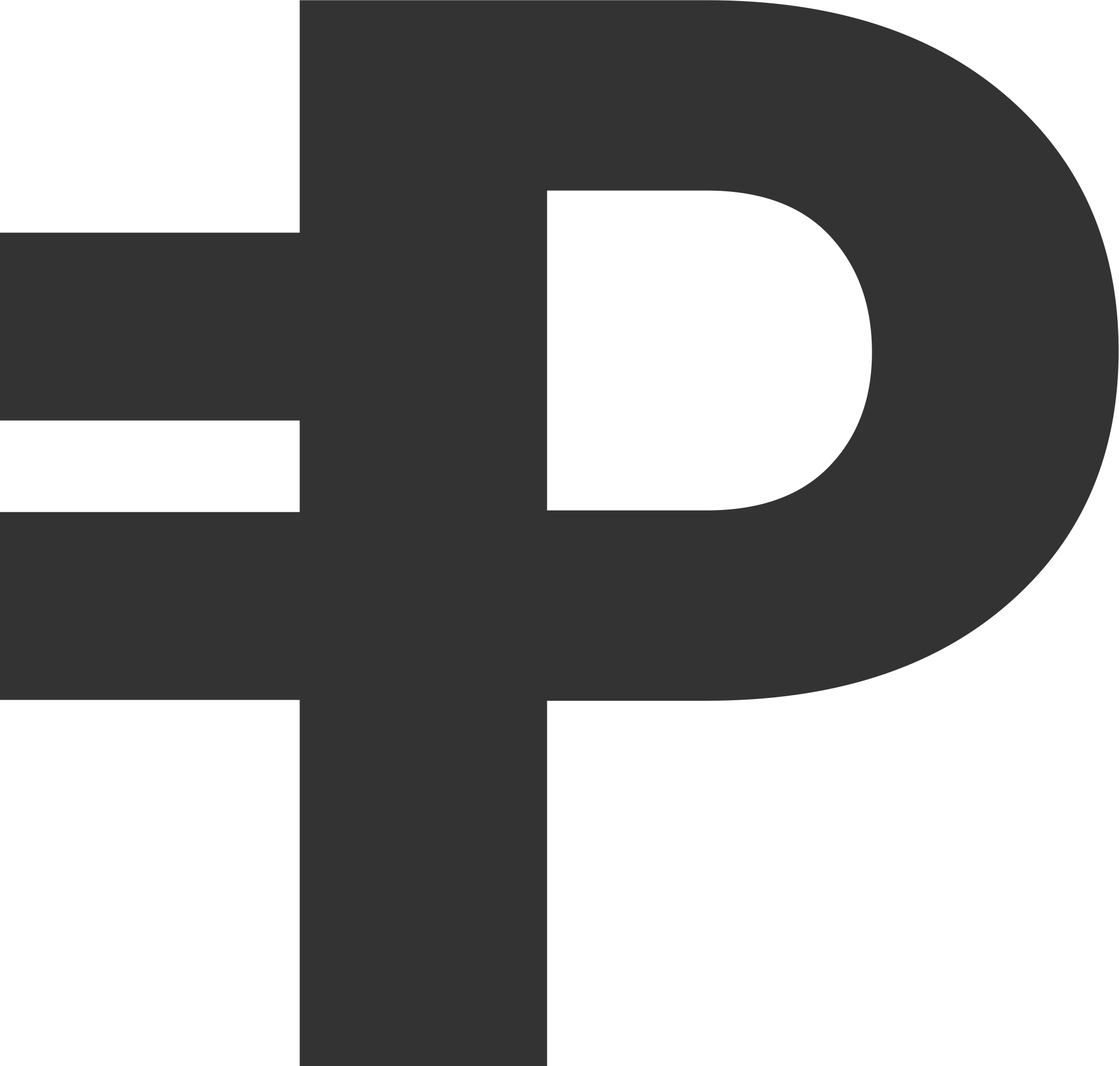
<style>
.page{position:relative;width:1119px;height:1066px;background:#333333}
.page>*{position:absolute;margin:0}
.t1{font:1498.9px "Roboto-Black";color:#333333}
</style>
<div class="page">
<p class="t1" style="left:300px;top:0px;width:819px;height:1066px">P</p>
</div>
